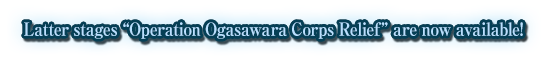
<style>
.page{position:relative;width:548px;height:59px;background:#ffffff}
.page>*{position:absolute;margin:0}
.t1{font:18px "RyuminPro-ExBold";letter-spacing:-0.04em;color:#b9e0ff;scale:0.9 1}
</style>
<div class="page">
<p class="t1" style="left:24px;top:22px;width:499px;height:17px">Latter stages “Operation Ogasawara Corps Relief” are now available!</p>
</div>
